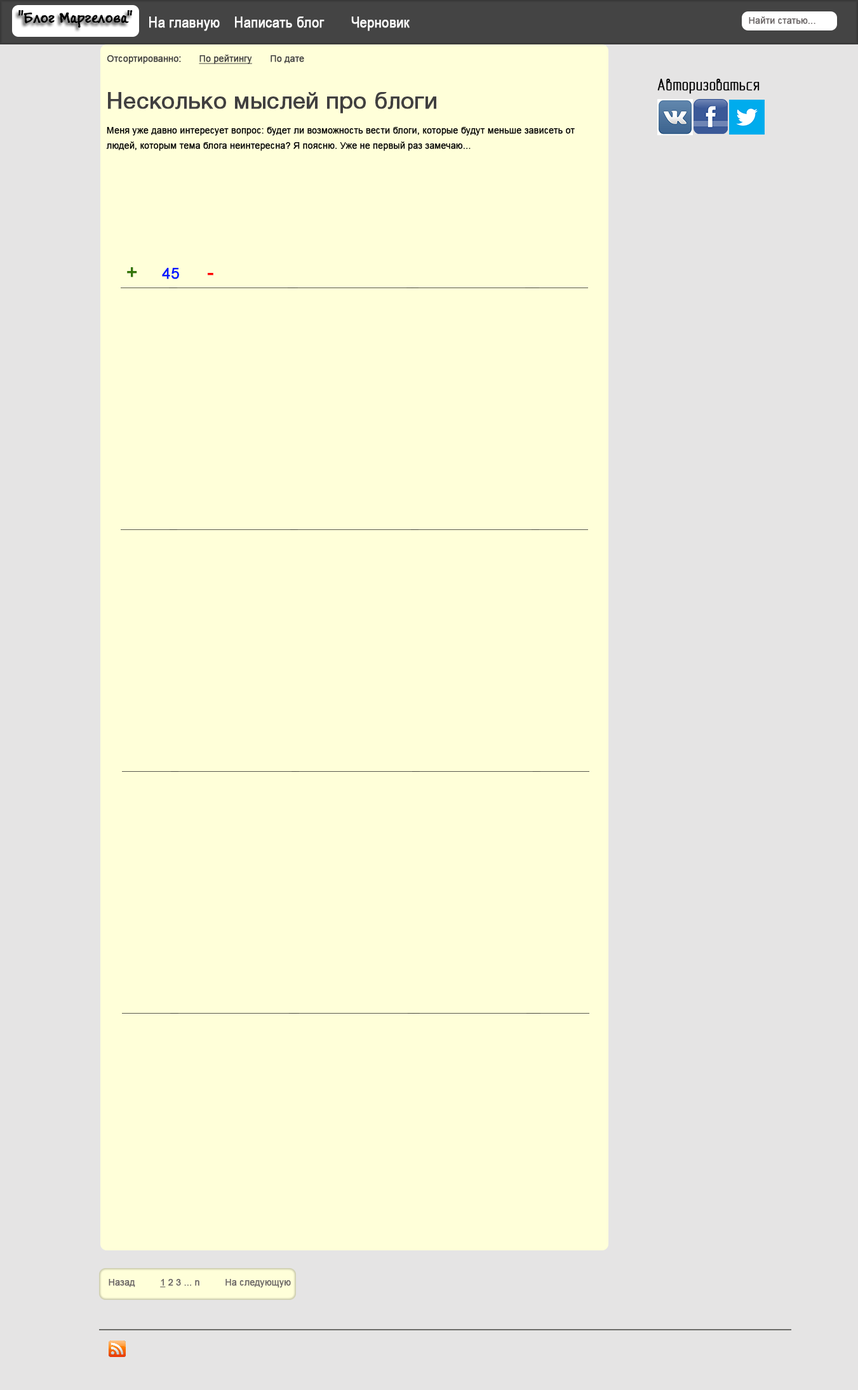
<style>
.page{position:relative;width:858px;height:1390px;background:#ffffd9}
.page>*{position:absolute;margin:0}
.t1{font:16.5px "BuxtonSketch";color:#000000;font-weight:bold}
.t2{font:15.2px "ArialNarrow";color:#fefefe;font-weight:bold}
.t3{font:8.9px "ArialMT";color:#6b6666;font-weight:bold}
.t4{font:8.9px "ArialMT";color:#414040;font-weight:bold}
.t5{font:8.9px "ArialMT";color:#000000;font-weight:bold}
.t6{font:8.9px "ArialMT";color:#414040;font-weight:bold;text-decoration:underline}
.t7{font:16.5px "GOSTypeAU";color:#000001;font-weight:bold}
.t8{font:22.9px "HelveticaNeueCyr-Roman";color:#414040;font-weight:bold}
.t9{font:8.9px/15.2px "ArialMT";color:#000000;font-weight:bold}
.t10{font:19px "ArialMT";color:#337507;font-weight:bold}
.t11{font:15.2px "ArialMT";color:#0018ff;font-weight:bold}
.t12{font:19px "ArialMT";color:#ff0000;font-weight:bold}
.t13{font:8.9px "ArialMT";color:#6b6666;font-weight:bold;text-decoration:underline}
</style>
<div class="page">
<p class="t1" style="left:18px;top:10px;width:115px;height:18px">"Блог Маргелова"</p>
<p class="t2" style="left:149px;top:17px;width:71px;height:14px">На главную</p>
<p class="t2" style="left:235px;top:17px;width:89px;height:11px">Написать блог</p>
<p class="t2" style="left:351px;top:17px;width:58px;height:14px">Черновик</p>
<p class="t3" style="left:748px;top:17px;width:67px;height:7px">Найти статью...</p>
<p class="t4" style="left:107px;top:55px;width:74px;height:9px">Отсортированно<span class="t5">:</span></p>
<p class="t6" style="left:199px;top:55px;width:53px;height:9px">По рейтингу</p>
<p class="t4" style="left:270px;top:55px;width:34px;height:8px">По дате</p>
<p class="t7" style="left:657px;top:79px;width:102px;height:15px">Авторизоваться</p>
<p class="t8" style="left:108px;top:92px;width:328px;height:22px">Несколько мыслей про блоги</p>
<p class="t9" style="left:106px;top:127px;width:469px;height:24px">Меня уже давно интересует вопрос: будет ли возможность вести блоги, которые будут меньше зависеть от <br>людей, которым тема блога неинтересна? Я поясню. Уже не первый раз замечаю...</p>
<p class="t10" style="left:127px;top:267px;width:10px;height:10px">+</p>
<p class="t11" style="left:162px;top:268px;width:17px;height:11px">45</p>
<p class="t12" style="left:208px;top:273px;width:5px;height:3px">-</p>
<p class="t3" style="left:109px;top:1279px;width:26px;height:8px">Назад</p>
<p class="t3" style="left:160px;top:1279px;width:39px;height:9px"><span class="t13">1</span> 2 3 ... n</p>
<p class="t3" style="left:225px;top:1279px;width:66px;height:9px">На следующую</p>
</div>
